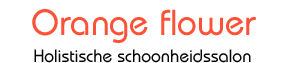
<style>
.page{position:relative;width:299px;height:63px;background:#ffffff}
.page>*{position:absolute;margin:0}
.t1{font:36px "BauhausITCbyBT-Medium";color:#fd5238}
.t2{font:18px "BauhausITCbyBT-Medium";color:#060606}
.t3{font:24px "BauhausITCbyBT-Medium";color:#060606}
</style>
<div class="page">
<p class="t1" style="left:32px;top:9px;width:224px;height:34px">Orange flower</p>
<p class="t2" style="left:34px;top:49px;width:217px;height:14px"><span class="t3">        </span>Holistische schoonheidssalon</p>
</div>
